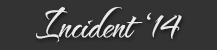
<style>
.page{position:relative;width:217px;height:50px;background:#333333}
.page>*{position:absolute;margin:0}
.t1{font:45px "TheNautiGalROB";color:#eaeaea}
</style>
<div class="page">
<p class="t1" style="left:36px;top:7px;width:146px;height:36px">Incident ‘14</p>
</div>
